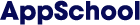
<style>
.page{position:relative;width:140px;height:25px;background:#ffffff}
.page>*{position:absolute;margin:0}
.t1{font:25px "AvantGardeLT-Bold";color:#070a57}
</style>
<div class="page">
<p class="t1" style="left:0px;top:0px;width:140px;height:25px">AppSchool</p>
</div>
